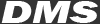
<style>
.page{position:relative;width:100px;height:24px;background:#ffffff}
.page>*{position:absolute;margin:0}
.t1{font:32.6px "FranklinGothic-HeavyItalic";color:#ffffff;scale:1.39 1}
</style>
<div class="page">
<p class="t1" style="left:1px;top:1px;width:97px;height:22px">DMS</p>
</div>
